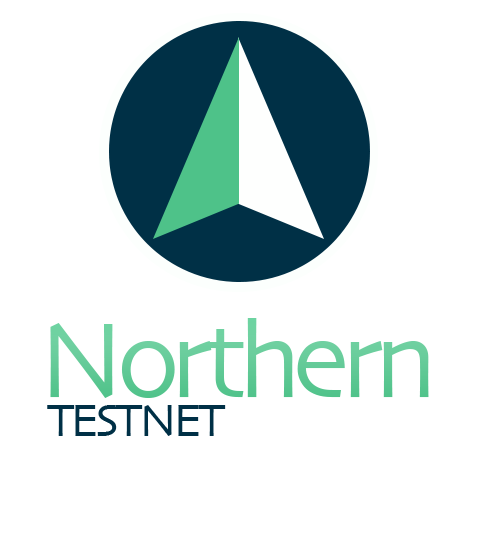
<style>
.page{position:relative;width:480px;height:550px;background:#ffffff}
.page>*{position:absolute;margin:0}
.t1{font:110.5px "Skia-Regular";letter-spacing:-0.08em;color:#65cb99}
.t2{font:48.1px "Skia-Regular";letter-spacing:-0.08em;color:#003046}
</style>
<div class="page">
<p class="t1" style="left:50px;top:318px;width:379px;height:80px">Northern</p>
<p class="t2" style="left:47px;top:405px;width:179px;height:31px">TESTNET</p>
</div>
